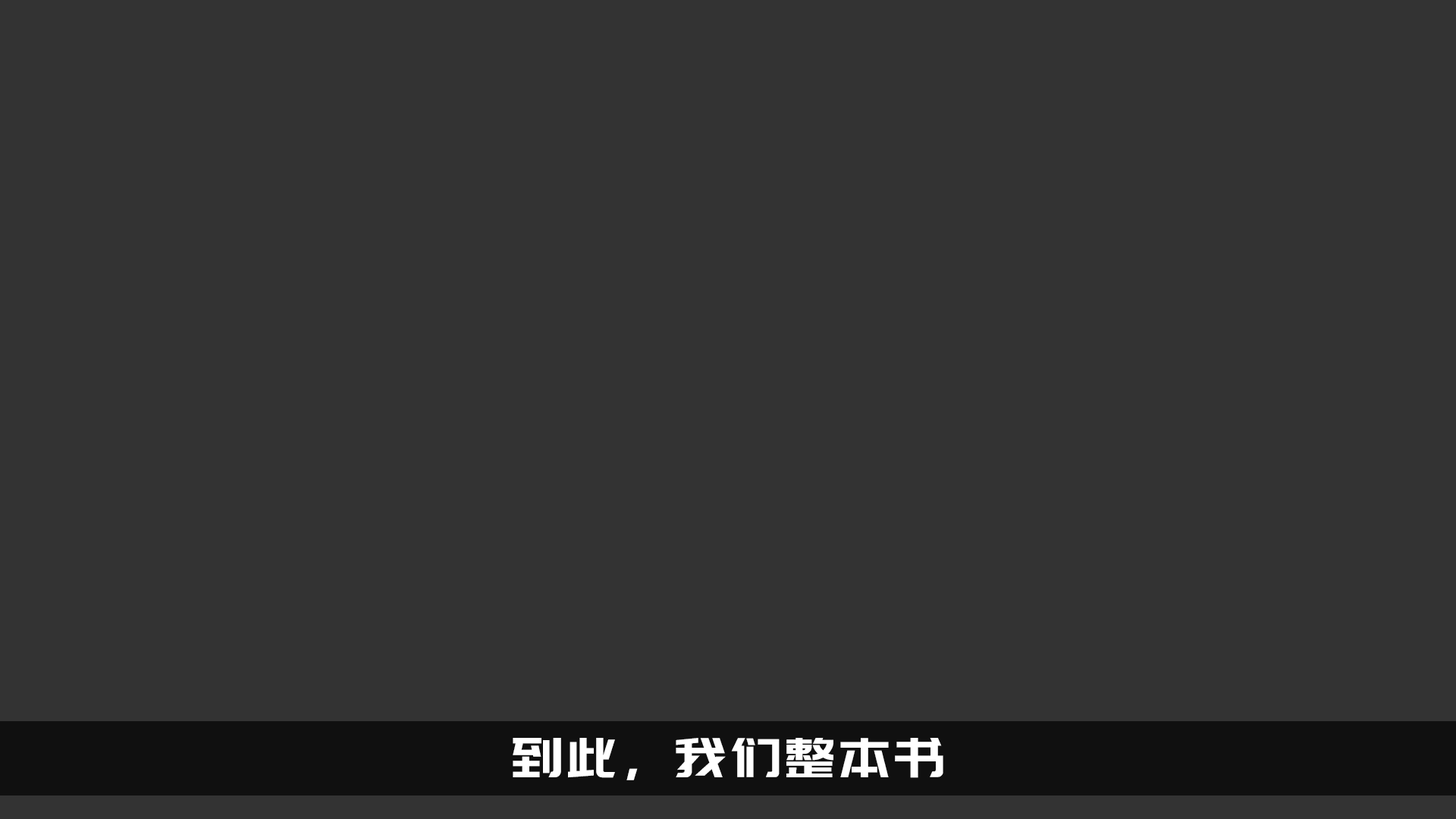
<style>
.page{position:relative;width:1456px;height:819px;background:#333333}
.page>*{position:absolute;margin:0}
.t1{font:54.6px "PangMenZhengDao-3";color:#ffffff}
</style>
<div class="page">
<p class="t1" style="left:513px;top:738px;width:430px;height:42px">到此，我们整本书</p>
</div>
